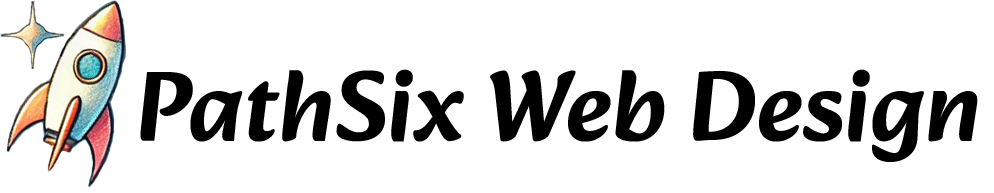
<style>
.page{position:relative;width:994px;height:193px;background:#ffffff}
.page>*{position:absolute;margin:0}
.t1{font:100px "Alkatra-SemiBold";color:#010000}
</style>
<div class="page">
<p class="t1" style="left:140px;top:69px;width:838px;height:93px">PathSix Web Design</p>
</div>
